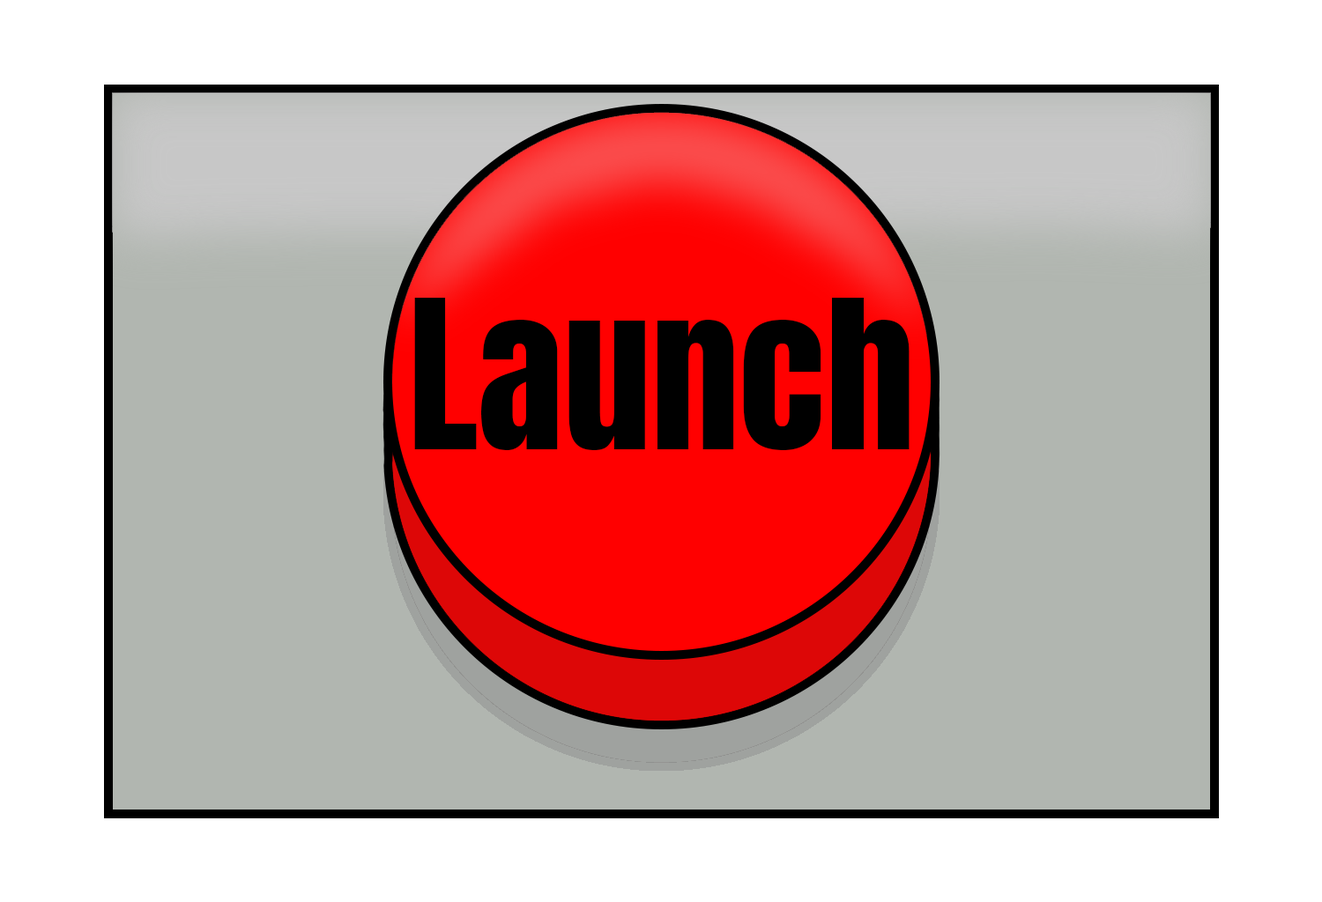
<style>
.page{position:relative;width:1322px;height:902px;background:#ffffff}
.page>*{position:absolute;margin:0}
.t1{font:176.2px "Anton-Regular";color:#000000}
</style>
<div class="page">
<p class="t1" style="left:414px;top:298px;width:495px;height:152px">Launch</p>
</div>
